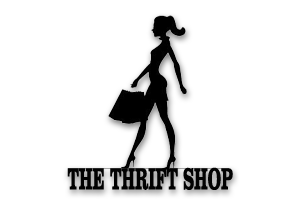
<style>
.page{position:relative;width:300px;height:200px;background:#ffffff}
.page>*{position:absolute;margin:0}
.t1{font:31.2px "ClarendonBT-Bold";color:#020202;scale:0.53 1}
</style>
<div class="page">
<p class="t1" style="left:67px;top:167px;width:166px;height:23px">THE THRIFT SHOP</p>
</div>
